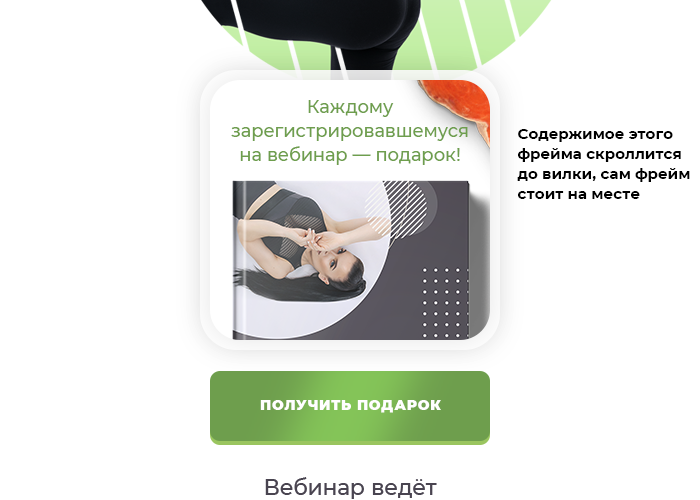
<style>
.page{position:relative;width:700px;height:500px;background:#ffffff}
.page>*{position:absolute;margin:0}
.t1{font:18px/24px "Montserrat-Medium";color:#6e9e4d}
.t2{font:15px/20px "Montserrat-Bold";color:#000000}
.t3{font:14px "Montserrat-Black";letter-spacing:0.05em;color:#ffffff;text-transform:uppercase}
</style>
<div class="page">
<p class="t1" style="left:231px;top:100px;width:237px;height:65px;text-align:center">Каждому зарегистрировавшемуся на вебинар — подарок!</p>
<p class="t2" style="left:517px;top:129px;width:173px;height:70px">Содержимое этого фрейма скроллится до вилки, сам фрейм стоит на месте</p>
<p class="t3" style="left:260px;top:400px;width:181px;height:13px">Получить подарок</p>
</div>
